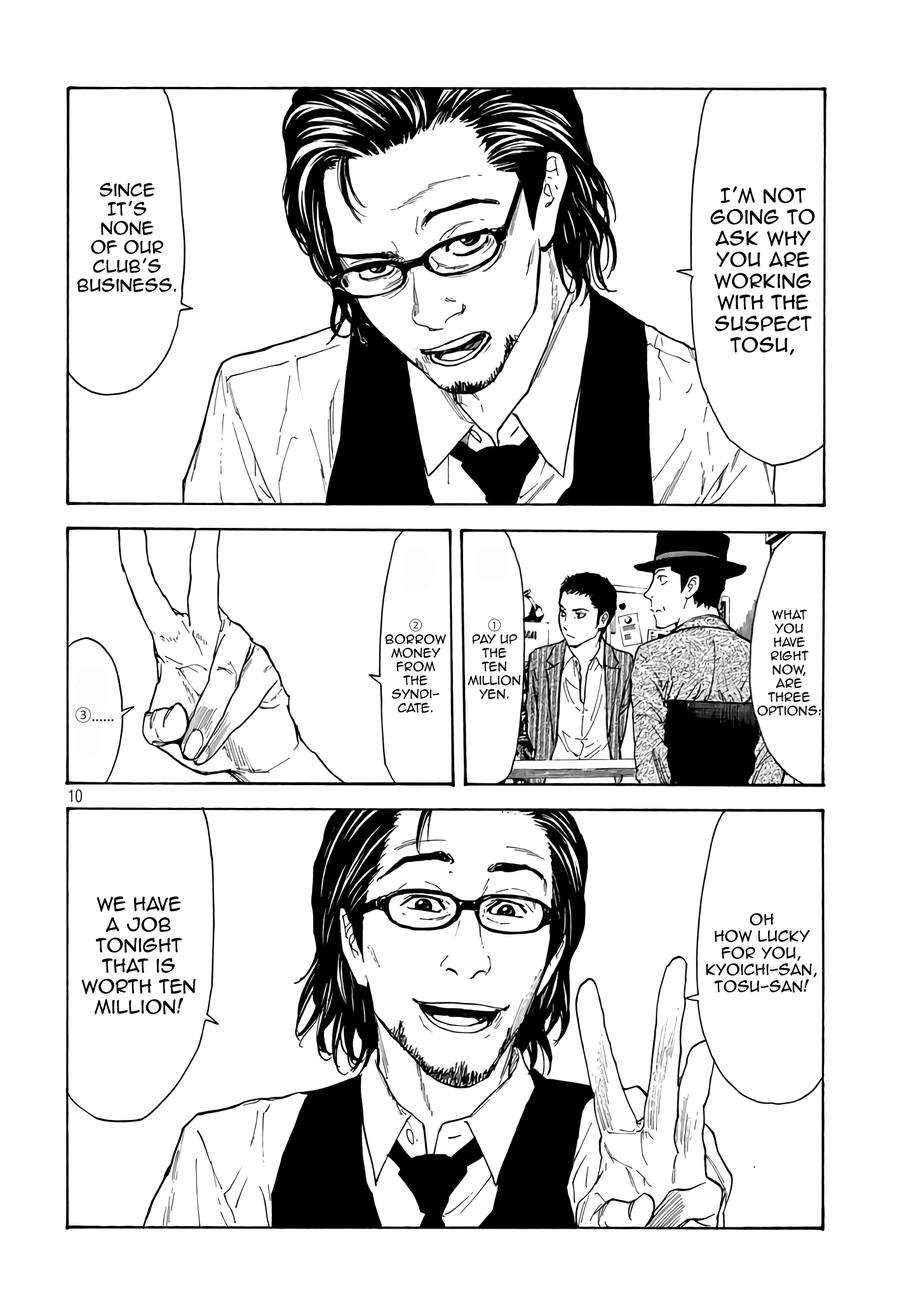
<style>
.page{position:relative;width:916px;height:1301px;background:#ffffff}
.page>*{position:absolute;margin:0}
.t1{font:15.9px "AnimeAce2.0BB";color:#000000}
.t2{font:17.8px "AnimeAce2.0BB";color:#000000}
.t3{font:11.4px "AnimeAce2.0BB";color:#000000}
.t4{font:13.3px "KozGoPr6N-Regular";color:#000000}
.t5{font:16.5px "KozGoPr6N-Regular";color:#000000}
.t6{font:17.2px "AnimeAce2.0BB";color:#000000}
.t7{font:14px "AnimeAce2.0BB";color:#000000}
</style>
<div class="page">
<p class="t1" style="left:77px;top:182px;width:100px;height:110px;text-align:center">since<br>It’s <br>none <br>of our club’s business.</p>
<p class="t2" style="left:710px;top:186px;width:105px;height:169px;text-align:center">I’m not going to ask why you are working with the suspect Tosu,</p>
<p class="t3" style="left:757px;top:609px;width:65px;height:107px;text-align:center">What <br>you <br>have right now,<br>are three options:</p>
<p class="t3" style="left:385px;top:619px;width:61px;height:94px;text-align:center"><span class="t4">② </span>borrow money from the syndi-<br>cate.</p>
<p class="t3" style="left:468px;top:619px;width:53px;height:81px;text-align:center"><span class="t4">1 <br></span>pay up the <br>ten million yen.</p>
<p class="t5" style="left:76px;top:707px;width:38px;height:16px">③......</p>
<p class="t6" style="left:81px;top:897px;width:115px;height:118px;text-align:center">We have <br>a job tonight that is worth ten million!</p>
<p class="t7" style="left:706px;top:913px;width:111px;height:80px;text-align:center">Oh <br>how lucky <br>for you, Kyoichi-san, Tosu-san!</p>
</div>
